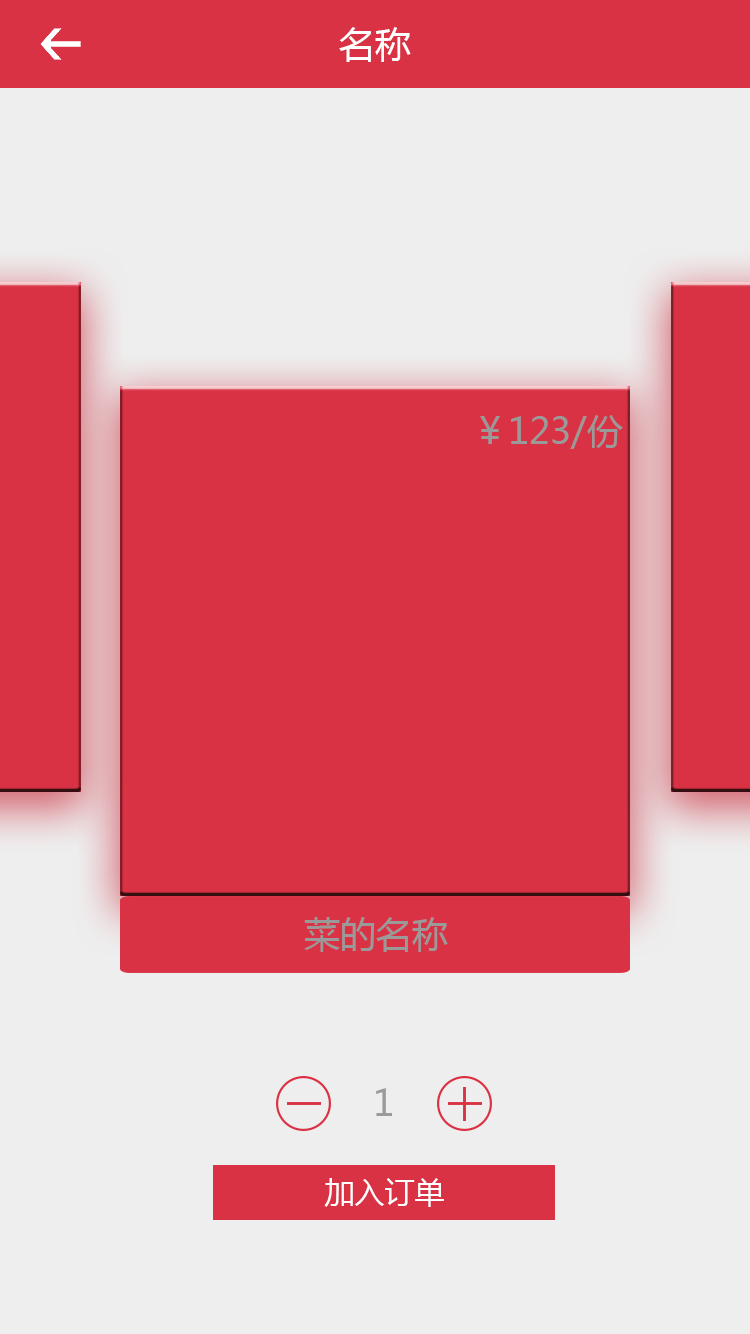
<style>
.page{position:relative;width:750px;height:1334px;background:#d93244}
.page>*{position:absolute;margin:0}
.t1{font:36px "MicrosoftYaHei";color:#ffffff}
.t2{font:36px "MicrosoftYaHei";color:#9b9a9a}
.t3{font:30px "MicrosoftYaHei";color:#ffffff}
</style>
<div class="page">
<p class="t1" style="left:339px;top:27px;width:72px;height:35px">名称</p>
<p class="t2" style="left:480px;top:415px;width:143px;height:34px">￥123/份</p>
<p class="t2" style="left:304px;top:917px;width:144px;height:35px">菜的名称</p>
<p class="t2" style="left:376px;top:1088px;width:16px;height:28px">1</p>
<p class="t3" style="left:324px;top:1178px;width:120px;height:29px">加入订单</p>
</div>
